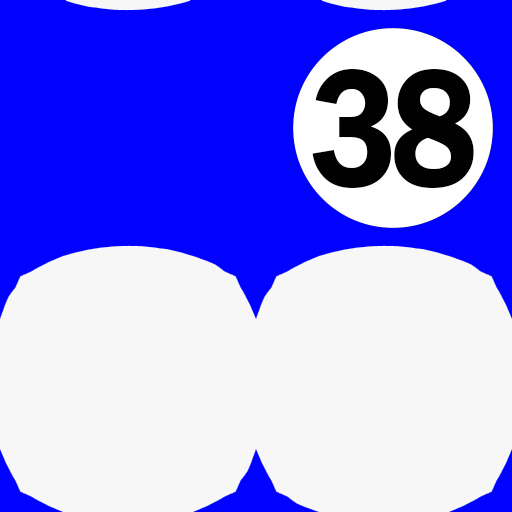
<style>
.page{position:relative;width:512px;height:512px;background:#f7f7f7}
.page>*{position:absolute;margin:0}
.t1{font:172.5px "FranklinGothic-Demi";letter-spacing:-0.05em;color:#010101;scale:0.87 1}
</style>
<div class="page">
<p class="t1" style="left:312px;top:69px;width:162px;height:119px">38</p>
</div>
